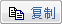
<style>
.page{position:relative;width:62px;height:24px;background:#f4f4f4}
.page>*{position:absolute;margin:0}
.t1{font:12px "SimSun";letter-spacing:0.075em;color:#3967a3}
</style>
<div class="page">
<p class="t1" style="left:31px;top:7px;width:24px;height:12px">复制</p>
</div>
